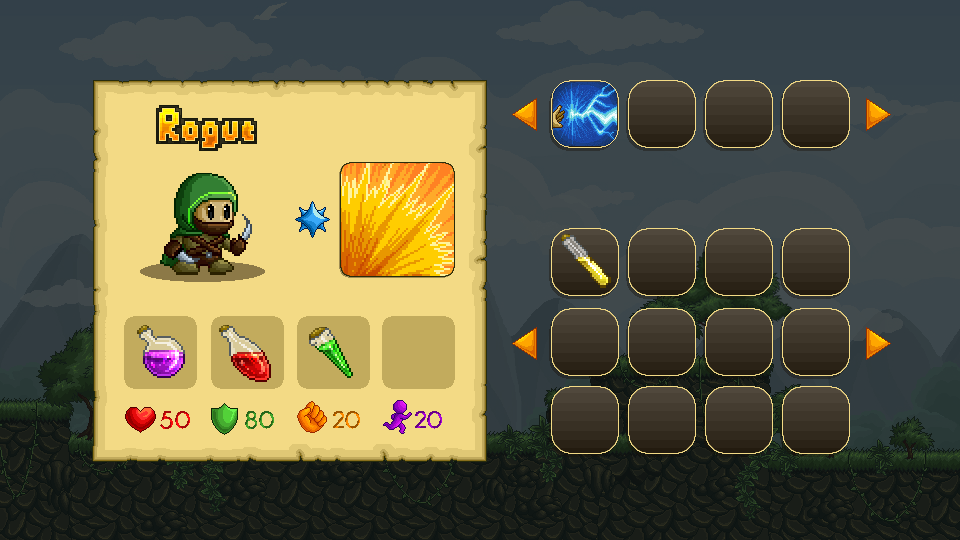
<style>
.page{position:relative;width:960px;height:540px}
.page>*{position:absolute;margin:0}
.t1{font:36px "SmackyFormulaOut";color:#191a0c}
.t2{font:36px "SmackyFormula"}
.t3{font:24.9px "LouisGeorgeCafe-Bold"}
</style>
<div class="page">
<p class="t1" style="left:156px;top:105px;width:101px;height:46px">Rogue</p>
<p class="t2" style="left:159px;top:108px;width:95px;height:40px">Rogue</p>
<p class="t3" style="left:160px;top:411px;width:30px;height:18px">50</p>
<p class="t3" style="left:245px;top:411px;width:29px;height:18px">80</p>
<p class="t3" style="left:333px;top:411px;width:27px;height:18px">20</p>
<p class="t3" style="left:415px;top:411px;width:27px;height:18px">20</p>
</div>
